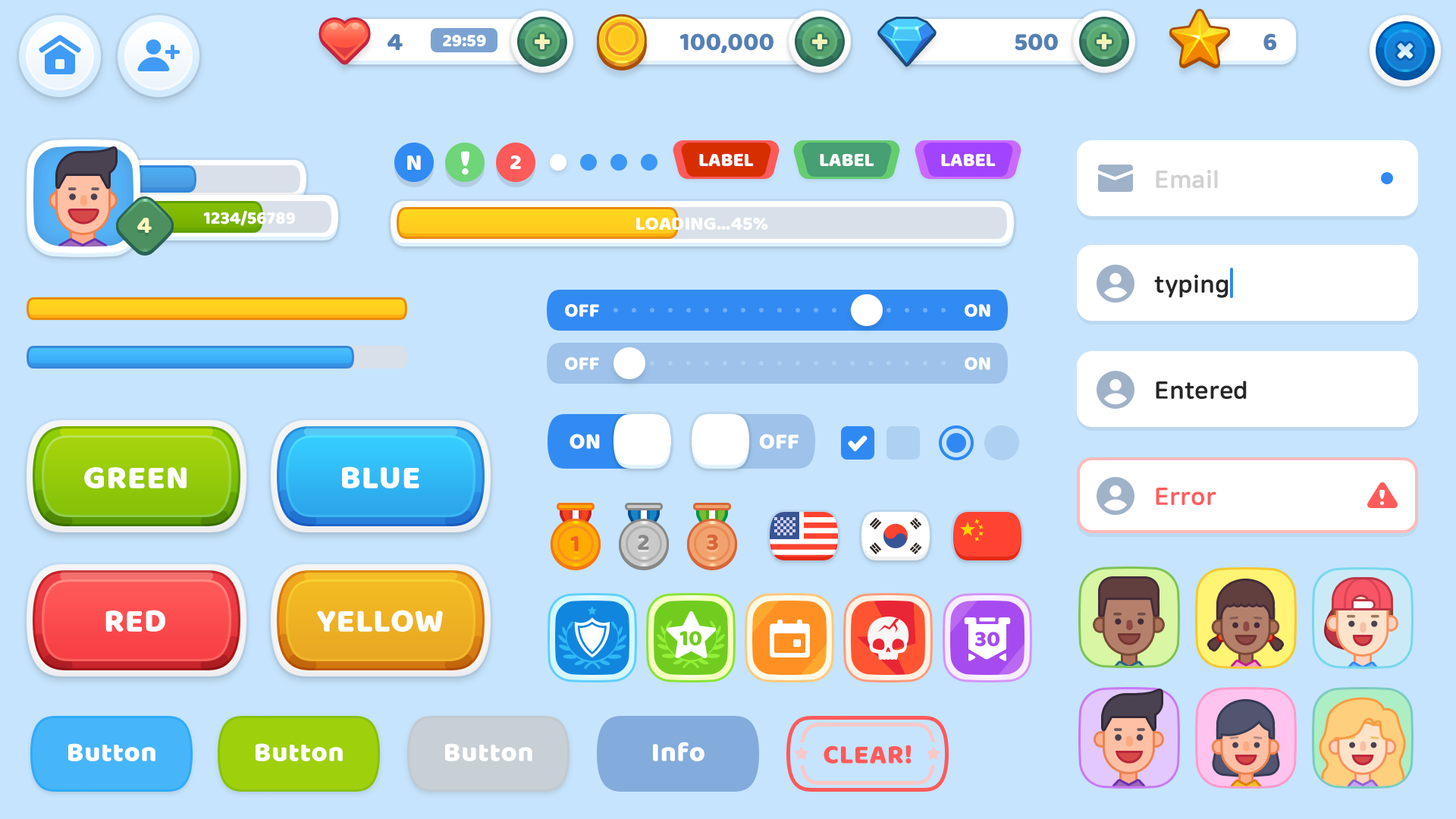
<style>
.page{position:relative;width:1456px;height:819px;background:#c6e4fd}
.page>*{position:absolute;margin:0}
.t1{font:25.8px "BalooBhaijaan-Regular";color:#5580b4;text-transform:uppercase}
.t2{font:18.2px "BalooBhaijaan-Regular";color:#ffffff;text-transform:uppercase}
.t3{font:24.3px "BalooBhaijaan-Regular";color:#ffffff}
.t4{font:22.7px "BalooBhaijaan-Regular";color:#ffffff}
.t5{font:19.8px "BalooBhaijaan-Regular";color:#ffffff;text-transform:uppercase}
.t6{font:24.3px "NanumSquareRoundOTFEB";color:#d1d1d1}
.t7{font:24.3px "BalooBhaijaan-Regular";color:#fff7bc;text-transform:uppercase}
.t8{font:24.3px "NanumSquareRoundOTFEB";color:#262626}
.t9{font:19.7px "BalooBhaijaan-Regular";color:#ffffff;text-transform:uppercase}
.t10{font:22.7px "BalooBhaijaan-Regular";color:#ffffff;text-transform:uppercase}
.t11{font:33.4px "BalooBhaijaan-Regular";color:#ffffff;text-transform:uppercase}
.t12{font:24.3px "NanumSquareRoundOTFEB";color:#ff5c5c}
.t13{font:24.3px "BalooBhaijaan-Regular";color:#d76639}
.t14{font:24.3px "BalooBhaijaan-Regular";color:#f3611e}
.t15{font:24.3px "BalooBhaijaan-Regular";color:#888888}
.t16{font:22.7px "BalooBhaijaan-Regular";color:#71cc20;text-transform:uppercase}
.t17{font:22.7px "BalooBhaijaan-Regular";color:#a64bf0;text-transform:uppercase}
.t18{font:27.3px "BalooBhaijaan-Regular";color:#ffffff}
.t19{font:27.3px "BalooBhaijaan-Regular";color:#fd5a5a;text-transform:uppercase}
</style>
<div class="page">
<p class="t1" style="left:388px;top:33px;width:15px;height:17px">4</p>
<p class="t2" style="left:443px;top:35px;width:43px;height:12px">29:59</p>
<p class="t1" style="left:679px;top:33px;width:94px;height:20px">100,000</p>
<p class="t1" style="left:1015px;top:33px;width:43px;height:18px">500</p>
<p class="t1" style="left:1263px;top:33px;width:14px;height:18px">6</p>
<p class="t3" style="left:407px;top:155px;width:14px;height:15px">N</p>
<p class="t4" style="left:510px;top:155px;width:11px;height:14px">2</p>
<p class="t5" style="left:699px;top:154px;width:55px;height:12px">label</p>
<p class="t5" style="left:820px;top:154px;width:54px;height:12px">label</p>
<p class="t5" style="left:941px;top:154px;width:55px;height:12px">label</p>
<p class="t6" style="left:1156px;top:170px;width:62px;height:19px">Email</p>
<p class="t7" style="left:137px;top:218px;width:15px;height:15px">4</p>
<p class="t2" style="left:203px;top:211px;width:92px;height:15px">1234/56789</p>
<p class="t5" style="left:636px;top:218px;width:132px;height:12px">loading...45%</p>
<p class="t8" style="left:1154px;top:275px;width:74px;height:23px">typing</p>
<p class="t9" style="left:565px;top:304px;width:34px;height:13px">off</p>
<p class="t9" style="left:965px;top:304px;width:25px;height:13px">on</p>
<p class="t9" style="left:565px;top:357px;width:34px;height:13px">off</p>
<p class="t9" style="left:965px;top:357px;width:25px;height:13px">on</p>
<p class="t8" style="left:1156px;top:381px;width:91px;height:19px">Entered</p>
<p class="t10" style="left:570px;top:434px;width:30px;height:15px">on</p>
<p class="t10" style="left:759px;top:434px;width:40px;height:15px">off</p>
<p class="t11" style="left:84px;top:467px;width:103px;height:21px">Green</p>
<p class="t11" style="left:342px;top:466px;width:77px;height:22px">blue</p>
<p class="t12" style="left:1156px;top:488px;width:60px;height:18px">Error</p>
<p class="t13" style="left:707px;top:534px;width:11px;height:17px">3</p>
<p class="t14" style="left:570px;top:538px;width:9px;height:16px">1</p>
<p class="t14" style="left:570px;top:536px;width:9px;height:15px">1</p>
<p class="t15" style="left:638px;top:535px;width:11px;height:15px">2</p>
<p class="t11" style="left:105px;top:610px;width:60px;height:22px">red</p>
<p class="t11" style="left:317px;top:610px;width:126px;height:22px">yellow</p>
<p class="t16" style="left:679px;top:631px;width:23px;height:15px">10</p>
<p class="t17" style="left:975px;top:632px;width:25px;height:15px">30</p>
<p class="t18" style="left:68px;top:743px;width:87px;height:18px">Button</p>
<p class="t18" style="left:256px;top:743px;width:87px;height:18px">Button</p>
<p class="t18" style="left:445px;top:743px;width:87px;height:18px">Button</p>
<p class="t18" style="left:653px;top:742px;width:51px;height:19px">Info</p>
<p class="t19" style="left:824px;top:745px;width:88px;height:19px">clear!</p>
</div>
